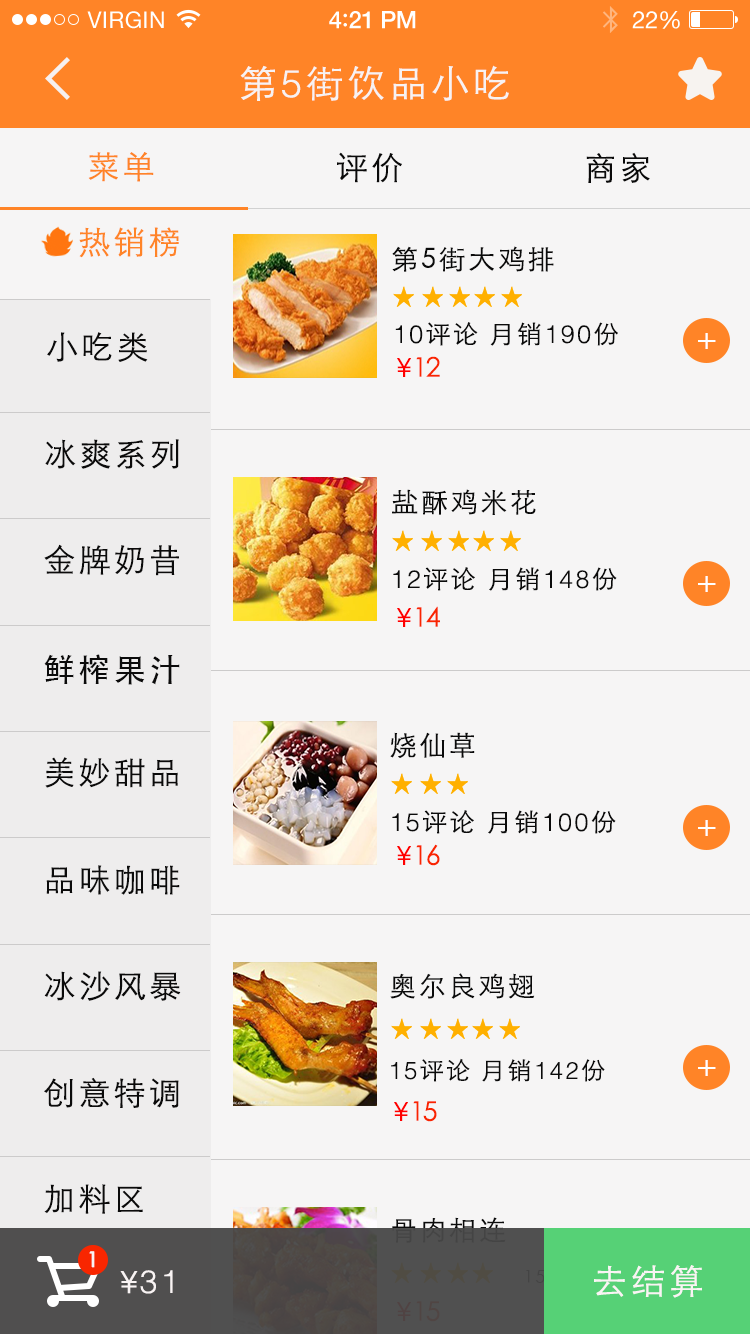
<style>
.page{position:relative;width:750px;height:1334px;background:#f6f5f5}
.page>*{position:absolute;margin:0}
.t1{font:23px "HelveticaNeue";letter-spacing:0.02em;color:#ffffff}
.t2{font:24px "HelveticaNeue-Medium";letter-spacing:-0.02em;color:#ffffff}
.t3{font:26px "Avenir-Medium";letter-spacing:-0.02em;color:#ffffff}
.t4{font:24px "HelveticaNeue";letter-spacing:-0.02em;color:#ffffff}
.t5{font:38px "STXihei";letter-spacing:0.1em;color:#f7f2f2}
.t6{font:38px "Helvetica-Light";letter-spacing:0.1em;color:#f7f2f2}
.t7{font:32px "STXihei";letter-spacing:0.1em;color:#ff8427}
.t8{font:32px "STXihei";letter-spacing:0.1em;color:#0a0a0a}
.t9{font:27px "STXihei";letter-spacing:0.1em;color:#0b0b0b}
.t10{font:25px "STXihei";letter-spacing:0.1em;color:#0b0b0b}
.t11{font:25px "Helvetica-Light";letter-spacing:0.1em;color:#0b0b0b}
.t12{font:32px "STXihei";letter-spacing:0.1em;color:#0b0b0b}
.t13{font:33.8px "STHeiti";letter-spacing:0.1em;color:#ffffff;scale:1.04 1}
.t14{font:27px "STXihei";letter-spacing:-0.075em;color:#ff0000}
.t15{font:27px "STXihei";letter-spacing:-0.075em;color:#f92500}
.t16{font:27px "STXihei";letter-spacing:-0.075em;color:#0a0a0a}
.t17{font:32px "STHeiti";letter-spacing:0.1em;color:#0b0b0b}
.t18{font:24px "STXihei";letter-spacing:0.1em;color:#0b0b0b}
.t19{font:24px "Helvetica-Light";letter-spacing:0.1em;color:#0b0b0b}
.t20{font:27px "STXihei";letter-spacing:0.1em}
.t21{font:21px "STHeiti";letter-spacing:0.1em;color:#f8f4f4;font-weight:bold}
.t22{font:35px "STXihei";letter-spacing:0.1em;color:#f9f4f4}
.t23{font:32px "STXihei";letter-spacing:0.1em;color:#f9f4f4}
.t24{font:32px "Helvetica-Light";letter-spacing:0.1em;color:#f9f4f4}
.t25{font:27px "STXihei";letter-spacing:-0.075em;color:#504343}
.t26{font:27px "STXihei";letter-spacing:-0.075em;color:#504543}
</style>
<div class="page">
<p class="t1" style="left:87px;top:11px;width:77px;height:18px">VIRGIN</p>
<p class="t2" style="left:329px;top:11px;width:87px;height:18px">4<span class="t3">:</span>21 PM</p>
<p class="t4" style="left:632px;top:11px;width:48px;height:18px">22%</p>
<p class="t5" style="left:240px;top:65px;width:269px;height:36px">第<span class="t6">5</span>街饮品小吃</p>
<p class="t7" style="left:88px;top:152px;width:66px;height:30px">菜单</p>
<p class="t8" style="left:337px;top:152px;width:65px;height:31px">评价</p>
<p class="t8" style="left:586px;top:152px;width:64px;height:31px">商家</p>
<p class="t7" style="left:79px;top:227px;width:100px;height:31px">热销榜</p>
<p class="t9" style="left:392px;top:246px;width:162px;height:26px">第5街大鸡排</p>
<p class="t10" style="left:395px;top:322px;width:223px;height:24px"><span class="t11">10</span>评论 月销<span class="t11">190</span>份</p>
<p class="t12" style="left:47px;top:332px;width:101px;height:30px">小吃类</p>
<p class="t13" style="left:698px;top:333px;width:18px;height:16px">+</p>
<p class="t14" style="left:397px;top:358px;width:14px;height:19px">￥</p>
<p class="t15" style="left:416px;top:356px;width:24px;height:21px"><span class="t16">   </span>12</p>
<p class="t12" style="left:45px;top:439px;width:134px;height:30px">冰爽系列</p>
<p class="t9" style="left:392px;top:489px;width:144px;height:26px">盐酥鸡米花</p>
<p class="t12" style="left:44px;top:544px;width:135px;height:32px">金牌奶昔</p>
<p class="t10" style="left:393px;top:567px;width:224px;height:24px"><span class="t11">12</span>评论 月销<span class="t11">148</span>份</p>
<p class="t13" style="left:698px;top:576px;width:18px;height:16px">+</p>
<p class="t15" style="left:416px;top:606px;width:24px;height:21px"><span class="t16">   </span>14</p>
<p class="t14" style="left:397px;top:608px;width:14px;height:19px">￥</p>
<p class="t17" style="left:44px;top:654px;width:136px;height:31px">鲜榨果汁</p>
<p class="t9" style="left:390px;top:732px;width:85px;height:26px">烧仙草</p>
<p class="t12" style="left:45px;top:757px;width:133px;height:31px">美妙甜品</p>
<p class="t10" style="left:392px;top:810px;width:224px;height:24px"><span class="t11">15</span>评论 月销<span class="t11">100</span>份</p>
<p class="t13" style="left:698px;top:820px;width:18px;height:16px">+</p>
<p class="t14" style="left:397px;top:846px;width:14px;height:19px">￥</p>
<p class="t15" style="left:416px;top:844px;width:24px;height:22px"><span class="t16">   </span>16</p>
<p class="t12" style="left:46px;top:865px;width:134px;height:30px">品味咖啡</p>
<p class="t12" style="left:44px;top:971px;width:137px;height:30px">冰沙风暴</p>
<p class="t9" style="left:390px;top:973px;width:145px;height:26px">奥尔良鸡翅</p>
<p class="t18" style="left:391px;top:1058px;width:214px;height:24px"><span class="t19">15</span>评论 月销<span class="t19">142</span>份</p>
<p class="t13" style="left:698px;top:1060px;width:18px;height:16px">+</p>
<p class="t12" style="left:44px;top:1077px;width:135px;height:31px">创意特调</p>
<p class="t14" style="left:394px;top:1102px;width:14px;height:19px">￥</p>
<p class="t15" style="left:413px;top:1101px;width:24px;height:21px"><span class="t16">   </span>15</p>
<p class="t12" style="left:44px;top:1184px;width:99px;height:30px">加料区</p>
<p class="t20" style="left:392px;top:1217px;width:114px;height:26px">骨肉相连</p>
<p class="t21" style="left:89px;top:1251px;width:6px;height:17px">1</p>
<p class="t22" style="left:594px;top:1265px;width:108px;height:33px">去结算</p>
<p class="t23" style="left:120px;top:1271px;width:18px;height:23px">￥</p>
<p class="t24" style="left:140px;top:1270px;width:33px;height:24px">31</p>
<p class="t25" style="left:397px;top:1302px;width:14px;height:19px">￥</p>
<p class="t26" style="left:416px;top:1301px;width:24px;height:21px">15</p>
</div>
